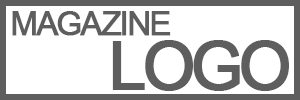
<style>
.page{position:relative;width:300px;height:100px;background:#ffffff}
.page>*{position:absolute;margin:0}
.t1{font:33.3px "ArialMT";letter-spacing:-0.08em;color:#5e5e5e;font-weight:bold}
.t2{font:66.7px "ArialMT";letter-spacing:-0.08em;color:#5e5e5e;font-weight:bold}
</style>
<div class="page">
<p class="t1" style="left:12px;top:11px;width:159px;height:25px">MAGAZINE</p>
<p class="t2" style="left:112px;top:40px;width:177px;height:51px">LOGO</p>
</div>
